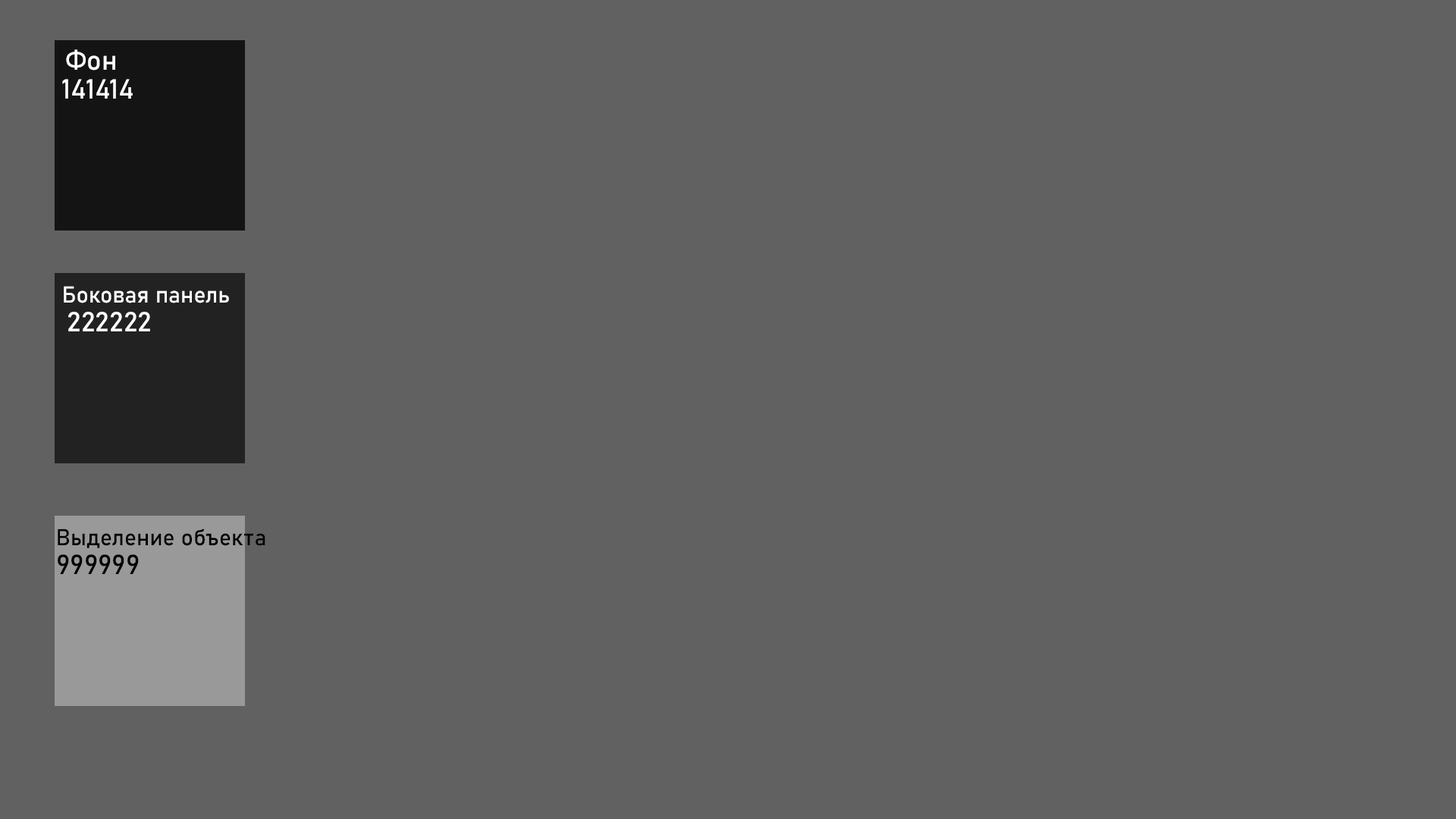
<style>
.page{position:relative;width:1456px;height:819px;background:#616161}
.page>*{position:absolute;margin:0}
.t1{font:27.3px "Bahnschrift";color:#ffffff}
.t2{font:22.7px "Bahnschrift";color:#ffffff}
.t3{font:22.7px "Bahnschrift";color:#000000}
.t4{font:27.3px "Bahnschrift";color:#000000}
</style>
<div class="page">
<p class="t1" style="left:66px;top:49px;width:49px;height:22px">Фон</p>
<p class="t1" style="left:62px;top:79px;width:71px;height:20px">141414</p>
<p class="t2" style="left:64px;top:286px;width:165px;height:17px">Боковая панель</p>
<p class="t1" style="left:68px;top:312px;width:82px;height:19px">222222</p>
<p class="t3" style="left:58px;top:529px;width:207px;height:19px">Выделение объекта</p>
<p class="t4" style="left:58px;top:554px;width:81px;height:20px">999999</p>
</div>
